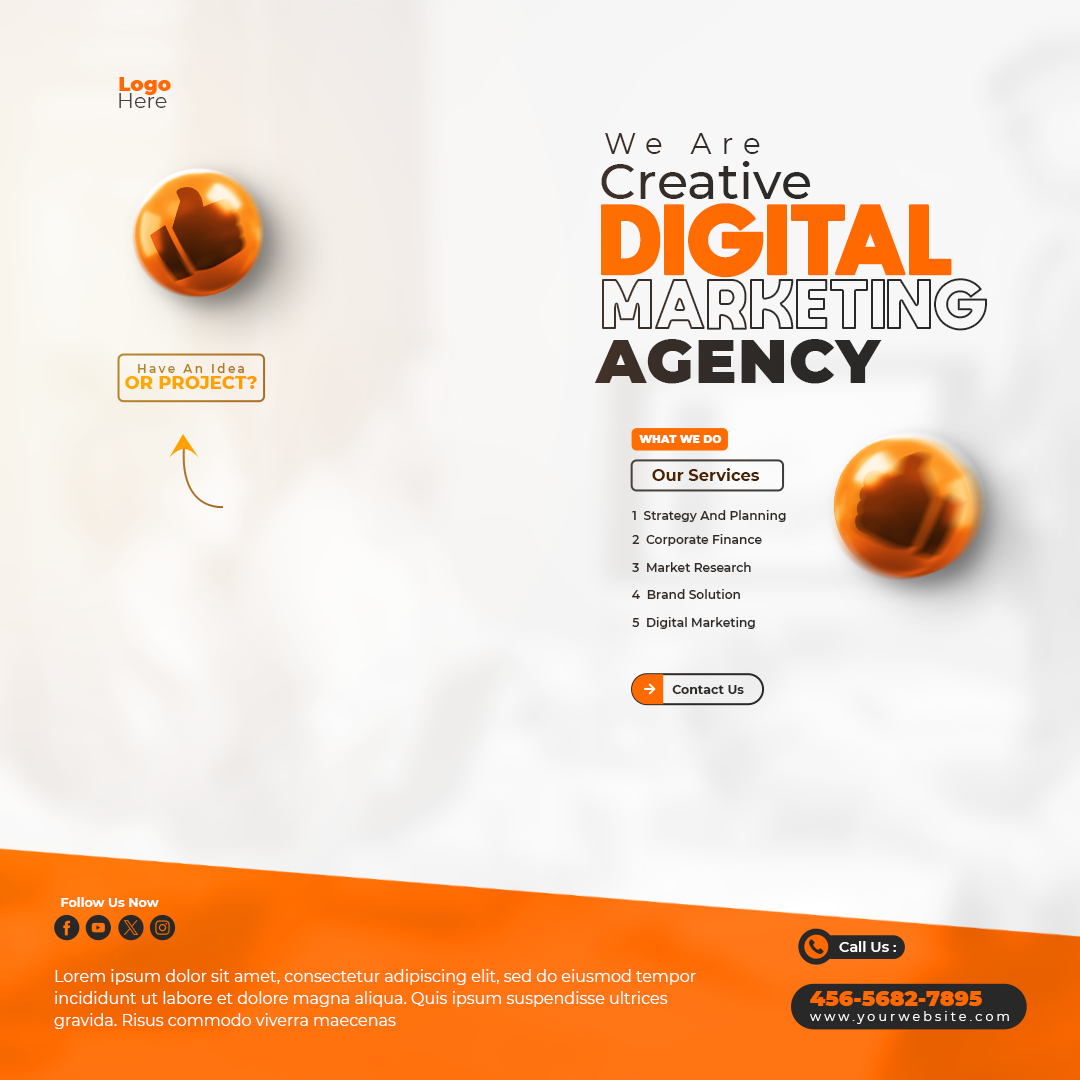
<style>
.page{position:relative;width:1080px;height:1080px}
.page>*{position:absolute;margin:0}
.t1{font:19.7px "Montserrat-Black";color:#ff6900}
.t2{font:20.8px "Montserrat-Regular";color:#414141}
.t3{font:29.1px "Montserrat-Regular";letter-spacing:0.35em;color:#282828}
.t4{font:51px "Montserrat-Medium";color:#282828}
.t5{font:71px "moon_get-Heavy";letter-spacing:0.025em;color:#ff6900;text-transform:uppercase}
.t6{font:50px "moon_get-Heavy";letter-spacing:0.025em;text-transform:uppercase}
.t7{font:61.6px "Montserrat-Black";letter-spacing:0.025em;color:#282828;text-transform:uppercase}
.t8{font:12px "Montserrat-SemiBold";letter-spacing:0.2em;color:#b17c28}
.t9{font:18px "Montserrat-ExtraBold";color:#ffa400;text-transform:uppercase}
.t10{font:10.9px "Montserrat-Black";color:#ffffff;text-transform:uppercase}
.t11{font:16.3px "Montserrat-Bold";color:#401f00}
.t12{font:12.2px "Montserrat-SemiBold";color:#282828}
.t13{font:12.5px "Montserrat-Bold";color:#282828}
.t14{font:12.7px "Montserrat-Bold";color:#ffffff}
.t15{font:14.3px "Montserrat-SemiBold";color:#ffffff}
.t16{font:16px/22px "Montserrat-Regular";color:#fefefe}
.t17{font:21.8px "Montserrat-Black";color:#ff6900}
.t18{font:12.6px "Montserrat-Regular";letter-spacing:0.25em;color:#ffffff}
</style>
<div class="page">
<p class="t1" style="left:119px;top:77px;width:52px;height:18px">Logo</p>
<p class="t2" style="left:119px;top:93px;width:48px;height:15px">Here</p>
<p class="t3" style="left:605px;top:133px;width:155px;height:21px">We Are</p>
<p class="t4" style="left:601px;top:161px;width:210px;height:38px">Creative</p>
<p class="t5" style="left:601px;top:203px;width:351px;height:75px">Digital</p>
<p class="t6" style="left:602px;top:278px;width:385px;height:53px">Marketing</p>
<p class="t7" style="left:594px;top:339px;width:288px;height:45px">Agency</p>
<p class="t8" style="left:138px;top:363px;width:106px;height:10px">Have An Idea</p>
<p class="t9" style="left:125px;top:376px;width:132px;height:13px">Or Project?</p>
<p class="t10" style="left:639px;top:435px;width:83px;height:8px">What We Do</p>
<p class="t11" style="left:652px;top:468px;width:107px;height:13px">Our Services</p>
<p class="t12" style="left:632px;top:510px;width:154px;height:12px">1  Strategy And Planning</p>
<p class="t12" style="left:632px;top:534px;width:130px;height:12px">2  Corporate Finance</p>
<p class="t12" style="left:632px;top:562px;width:119px;height:10px">3  Market Research</p>
<p class="t12" style="left:632px;top:589px;width:108px;height:10px">4  Brand Solution</p>
<p class="t12" style="left:632px;top:617px;width:123px;height:12px">5  Digital Marketing</p>
<p class="t13" style="left:672px;top:685px;width:72px;height:9px">Contact Us</p>
<p class="t14" style="left:61px;top:897px;width:98px;height:10px">Follow Us Now</p>
<p class="t15" style="left:839px;top:941px;width:57px;height:11px">Call Us :</p>
<p class="t16" style="left:54px;top:969px;width:642px;height:60px">Lorem ipsum dolor sit amet, consectetur adipiscing elit, sed do eiusmod tempor incididunt ut labore et dolore magna aliqua. Quis ipsum suspendisse ultrices gravida. Risus commodo viverra maecenas</p>
<p class="t17" style="left:810px;top:991px;width:172px;height:15px">456-5682-7895</p>
<p class="t18" style="left:810px;top:1011px;width:199px;height:13px">www.yourwebsite.com</p>
</div>
